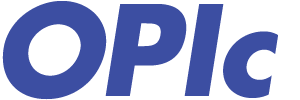
<style>
.page{position:relative;width:300px;height:100px;background:#ffffff}
.page>*{position:absolute;margin:0}
.t1{font:122px "FuturaStd-BoldOblique";color:#3c4ea2}
</style>
<div class="page">
<p class="t1" style="left:2px;top:1px;width:276px;height:99px">OPIc</p>
</div>
